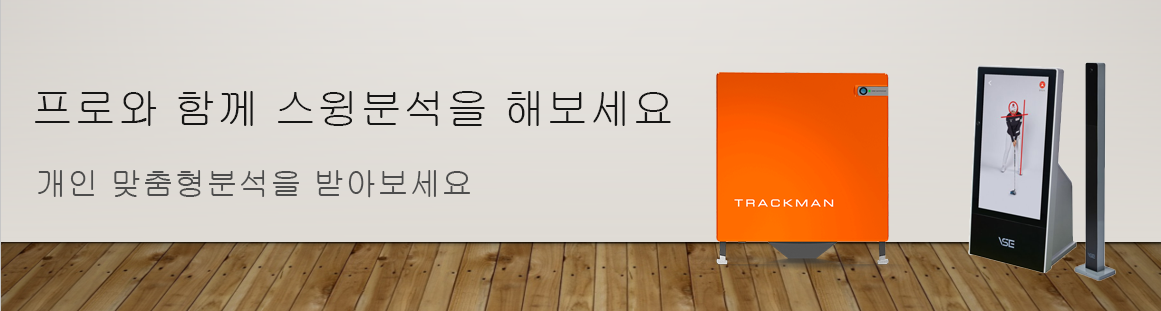
<style>
.page{position:relative;width:1161px;height:311px}
.page>*{position:absolute;margin:0}
.t1{font:42.7px "Gulim";color:#161615}
.t2{font:64px "Gulim";color:#000000}
.t3{font:32px "Gulim";color:#4d4d4d}
</style>
<div class="page">
<p class="t1" style="left:35px;top:91px;width:636px;height:35px"><span class="t2">                       </span> 프로와 함께 스윙분석을 해보세요</p>
<p class="t3" style="left:38px;top:170px;width:432px;height:28px">개인 맞춤형분석을 받아보세요</p>
</div>
